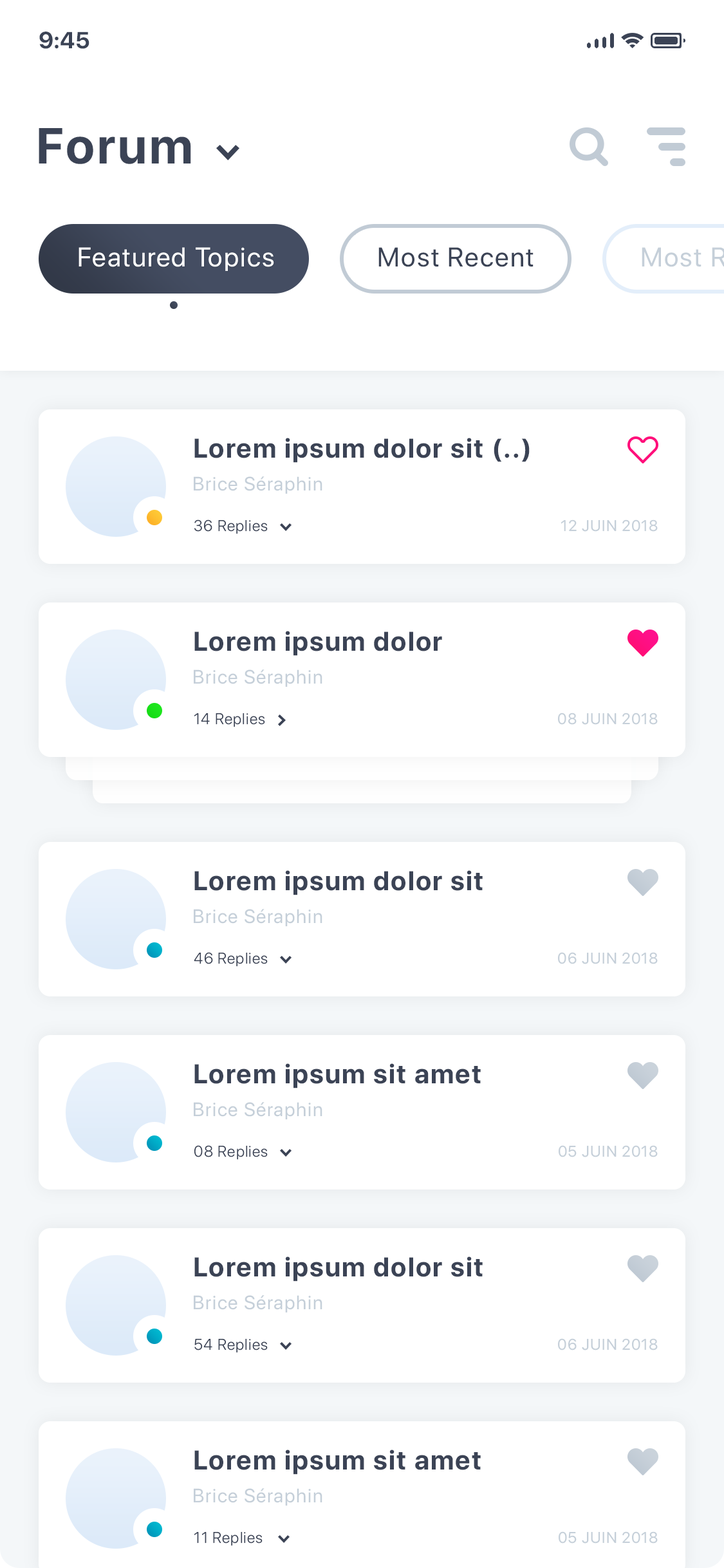
<style>
.page{position:relative;width:724px;height:1568px;background:#ffffff}
.page>*{position:absolute;margin:0}
.t1{font:23.2px "SFProDisplay-Bold";color:#3b4355}
.t2{font:50.2px "SFProDisplay-Bold";letter-spacing:0.05em;color:#3b4355}
.t3{font:27px "SFProDisplay-Regular";letter-spacing:0.05em;color:#ffffff}
.t4{font:27px "SFProDisplay-Regular";letter-spacing:0.05em;color:#3b4355}
.t5{font:27px "SFProDisplay-Bold";letter-spacing:0.05em;color:#3b4355}
.t6{font:19.3px "SFProDisplay-Regular";letter-spacing:0.05em;color:#c5cfd9}
.t7{font:15.4px "SFProDisplay-Light";letter-spacing:0.05em;color:#3b4355}
.t8{font:15.4px "SFProDisplay-Regular";letter-spacing:0.05em;color:#c5cfd9}
</style>
<div class="page">
<p class="t1" style="left:39px;top:32px;width:50px;height:17px">9:45</p>
<p class="t2" style="left:39px;top:128px;width:152px;height:36px">Forum</p>
<p class="t3" style="left:79px;top:247px;width:195px;height:24px">Featured Topics</p>
<p class="t4" style="left:378px;top:247px;width:156px;height:20px">Most Recent</p>
<p class="t5" style="left:194px;top:438px;width:336px;height:25px">Lorem ipsum dolor sit (..)</p>
<p class="t6" style="left:194px;top:476px;width:128px;height:18px">Brice Séraphin</p>
<p class="t7" style="left:194px;top:519px;width:74px;height:15px">36 Replies</p>
<p class="t8" style="left:561px;top:519px;width:97px;height:13px">12 JUIN 2018</p>
<p class="t5" style="left:194px;top:631px;width:248px;height:25px">Lorem ipsum dolor</p>
<p class="t6" style="left:194px;top:669px;width:128px;height:18px">Brice Séraphin</p>
<p class="t7" style="left:194px;top:713px;width:71px;height:14px">14 Replies</p>
<p class="t8" style="left:558px;top:713px;width:100px;height:12px">08 JUIN 2018</p>
<p class="t5" style="left:194px;top:870px;width:289px;height:25px">Lorem ipsum dolor sit</p>
<p class="t6" style="left:194px;top:909px;width:128px;height:17px">Brice Séraphin</p>
<p class="t7" style="left:194px;top:952px;width:74px;height:15px">46 Replies</p>
<p class="t8" style="left:558px;top:952px;width:100px;height:12px">06 JUIN 2018</p>
<p class="t5" style="left:194px;top:1063px;width:287px;height:25px">Lorem ipsum sit amet</p>
<p class="t6" style="left:194px;top:1102px;width:128px;height:17px">Brice Séraphin</p>
<p class="t7" style="left:194px;top:1145px;width:74px;height:15px">08 Replies</p>
<p class="t8" style="left:559px;top:1145px;width:99px;height:12px">05 JUIN 2018</p>
<p class="t5" style="left:194px;top:1256px;width:289px;height:26px">Lorem ipsum dolor sit</p>
<p class="t6" style="left:194px;top:1295px;width:128px;height:17px">Brice Séraphin</p>
<p class="t7" style="left:194px;top:1339px;width:74px;height:14px">54 Replies</p>
<p class="t8" style="left:558px;top:1338px;width:100px;height:12px">06 JUIN 2018</p>
<p class="t5" style="left:194px;top:1450px;width:287px;height:25px">Lorem ipsum sit amet</p>
<p class="t6" style="left:194px;top:1488px;width:128px;height:18px">Brice Séraphin</p>
<p class="t7" style="left:194px;top:1532px;width:69px;height:14px">11 Replies</p>
<p class="t8" style="left:559px;top:1531px;width:99px;height:13px">05 JUIN 2018</p>
</div>
